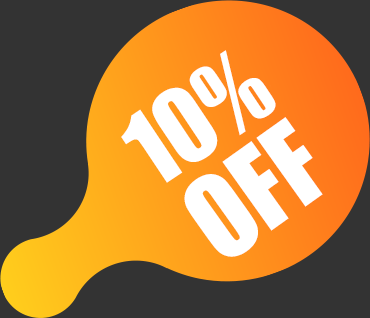
<style>
.page{position:relative;width:370px;height:318px;background:#333333}
.page>*{position:absolute;margin:0}
.t1{font:95.7px "Impact";color:#ffffff}
.t2{font:106.8px "Impact";color:#ffffff;scale:0.96 1}
</style>
<div class="page">
<p class="t1" style="left:121px;top:50px;width:155px;height:133px;rotate:-34deg">10%</p>
<p class="t2" style="left:184px;top:117px;width:139px;height:140px;rotate:-35deg">OFF</p>
</div>
